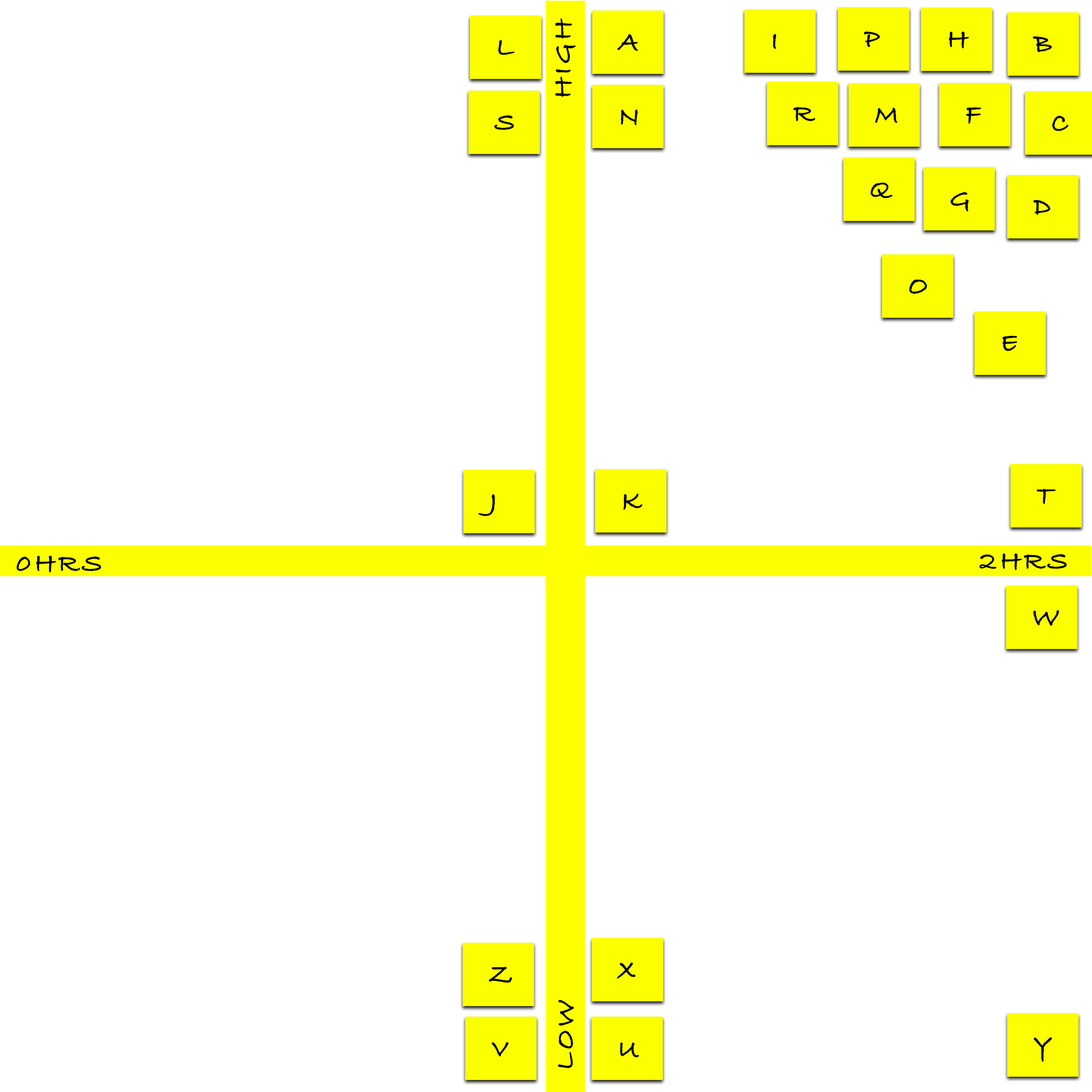
<style>
.page{position:relative;width:1092px;height:1092px;background:#ffffff}
.page>*{position:absolute;margin:0}
.t1{font:27.6px "BradleyHandITCTT-Bold";letter-spacing:0.12em;color:#000000;text-transform:uppercase}
</style>
<div class="page">
<p class="t1" style="left:555px;top:18px;width:20px;height:79px;rotate:-90deg">high</p>
<p class="t1" style="left:498px;top:40px;width:16px;height:15px">L</p>
<p class="t1" style="left:617px;top:34px;width:21px;height:17px">A</p>
<p class="t1" style="left:773px;top:34px;width:3px;height:15px">I</p>
<p class="t1" style="left:864px;top:31px;width:16px;height:16px">P</p>
<p class="t1" style="left:949px;top:31px;width:20px;height:17px">H</p>
<p class="t1" style="left:1033px;top:36px;width:19px;height:16px">B</p>
<p class="t1" style="left:621px;top:110px;width:17px;height:15px">N</p>
<p class="t1" style="left:793px;top:107px;width:22px;height:15px">r</p>
<p class="t1" style="left:875px;top:108px;width:23px;height:15px">M</p>
<p class="t1" style="left:966px;top:107px;width:15px;height:17px">F</p>
<p class="t1" style="left:494px;top:115px;width:20px;height:15px">S</p>
<p class="t1" style="left:1052px;top:116px;width:17px;height:15px">C</p>
<p class="t1" style="left:870px;top:182px;width:23px;height:16px">Q</p>
<p class="t1" style="left:950px;top:192px;width:19px;height:19px">G</p>
<p class="t1" style="left:1033px;top:200px;width:17px;height:15px">D</p>
<p class="t1" style="left:909px;top:280px;width:18px;height:14px">O</p>
<p class="t1" style="left:1002px;top:336px;width:15px;height:15px">E</p>
<p class="t1" style="left:478px;top:494px;width:17px;height:23px">J</p>
<p class="t1" style="left:623px;top:493px;width:19px;height:17px">K</p>
<p class="t1" style="left:1037px;top:488px;width:19px;height:16px">T</p>
<p class="t1" style="left:16px;top:555px;width:85px;height:18px">0HRS</p>
<p class="t1" style="left:980px;top:553px;width:87px;height:17px">2hrs</p>
<p class="t1" style="left:1033px;top:610px;width:26px;height:16px">W</p>
<p class="t1" style="left:617px;top:962px;width:19px;height:17px">x</p>
<p class="t1" style="left:489px;top:967px;width:23px;height:16px">Z</p>
<p class="t1" style="left:558px;top:1000px;width:16px;height:68px;rotate:-90deg">low</p>
<p class="t1" style="left:1034px;top:1037px;width:18px;height:25px">Y</p>
<p class="t1" style="left:492px;top:1042px;width:17px;height:15px">V</p>
<p class="t1" style="left:620px;top:1042px;width:19px;height:15px">U</p>
</div>
